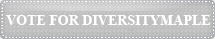
<style>
.page{position:relative;width:215px;height:39px}
.page>*{position:absolute;margin:0}
.t1{font:14px "TimesNewRomanPS-BoldMT";color:#ffffff}
</style>
<div class="page">
<p class="t1" style="left:6px;top:15px;width:204px;height:10px">VOTE FOR DIVERSITYMAPLE</p>
</div>
